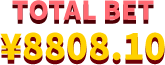
<style>
.page{position:relative;width:165px;height:65px;background:#ffffff}
.page>*{position:absolute;margin:0}
.t1{font:26px "NotoSansCJKsc-Black";color:#ff6972}
.t2{font:36px "NotoSansCJKsc-Black";color:#ffd100;text-transform:uppercase}
.t3{font:36px "NotoSansCJKsc-Black";color:#ffd100}
</style>
<div class="page">
<p class="t1" style="left:12px;top:0px;width:142px;height:20px">TOTAL BET</p>
<p class="t2" style="left:0px;top:32px;width:165px;height:29px"><span class="t3">¥</span>8808.10</p>
</div>
